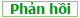
<style>
.page{position:relative;width:80px;height:18px;background:#ffffff}
.page>*{position:absolute;margin:0}
.t1{font:13.9px "Tahoma-Bold";color:#079d18}
</style>
<div class="page">
<p class="t1" style="left:11px;top:2px;width:60px;height:12px">Phản hồi</p>
</div>
